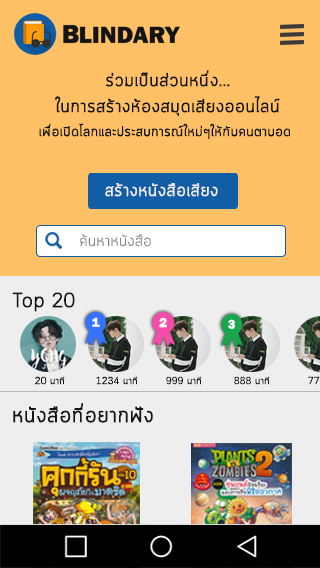
<style>
.page{position:relative;width:320px;height:568px;background:#ffc066}
.page>*{position:absolute;margin:0}
.t1{font:18px "Cloud-Light";color:#141414;font-weight:bold}
.t2{font:14px "Cloud-Light";color:#141414;font-weight:bold}
.t3{font:17.6px "Cloud-Light";color:#efefef;font-weight:bold}
.t4{font:16.2px "Cloud-Light";color:#868686}
.t5{font:20px "Cloud-Light";color:#141414;font-weight:bold}
.t6{font:12.6px "FranklinGothic-Demi";color:#fefeff;font-weight:bold}
.t7{font:12.9px "FranklinGothic-Demi";color:#fefeff;font-weight:bold}
.t8{font:10px "Cloud-Light";color:#141414;font-weight:bold}
.t9{font:21.6px "Cloud-Light";color:#141414;font-weight:bold}
</style>
<div class="page">
<p class="t1" style="left:106px;top:70px;width:124px;height:17px">ร่วมเป็นส่วนหนึ่ง...</p>
<p class="t1" style="left:55px;top:96px;width:225px;height:20px">ในการสร้างห้องสมุดเสียงออนไลน์</p>
<p class="t2" style="left:39px;top:123px;width:251px;height:16px">เพื่อเปิดโลกและประสบการณ์ใหม่ๆให้กับคนตาบอด</p>
<p class="t3" style="left:105px;top:183px;width:113px;height:14px">สร้างหนังสือเสียง</p>
<p class="t4" style="left:80px;top:234px;width:71px;height:13px">ค้นหาหนังสือ</p>
<p class="t5" style="left:12px;top:292px;width:63px;height:20px">Top 20</p>
<p class="t6" style="left:92px;top:317px;width:8px;height:10px">1</p>
<p class="t7" style="left:159px;top:317px;width:8px;height:11px">2</p>
<p class="t6" style="left:228px;top:319px;width:7px;height:10px">3</p>
<p class="t8" style="left:35px;top:376px;width:30px;height:9px">20 นาที</p>
<p class="t8" style="left:96px;top:376px;width:42px;height:9px">1234 นาที</p>
<p class="t8" style="left:166px;top:376px;width:36px;height:9px">999 นาที</p>
<p class="t8" style="left:234px;top:376px;width:36px;height:9px">888 นาที</p>
<p class="t9" style="left:13px;top:403px;width:140px;height:20px">หนังสือที่อยากฟัง</p>
</div>
